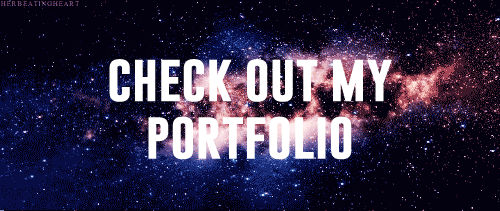
<style>
.page{position:relative;width:500px;height:211px;background:#030110}
.page>*{position:absolute;margin:0}
.t1{font:48px "GoboldBold";color:#ffffff}
</style>
<div class="page">
<p class="t1" style="left:109px;top:59px;width:283px;height:101px;text-align:center">check out my <br>portfolio</p>
</div>
